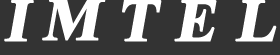
<style>
.page{position:relative;width:280px;height:55px;background:#333333}
.page>*{position:absolute;margin:0}
.t1{font:60px "TimesNewRomanPS-BoldMT";letter-spacing:0.005em;color:#ffffff;font-weight:bold;font-style:italic}
</style>
<div class="page">
<p class="t1" style="left:4px;top:0px;width:30px;height:42px">I</p>
<p class="t1" style="left:42px;top:0px;width:64px;height:41px">M</p>
<p class="t1" style="left:122px;top:0px;width:40px;height:42px">T</p>
<p class="t1" style="left:174px;top:0px;width:43px;height:42px">E</p>
<p class="t1" style="left:235px;top:0px;width:42px;height:42px">L</p>
</div>
